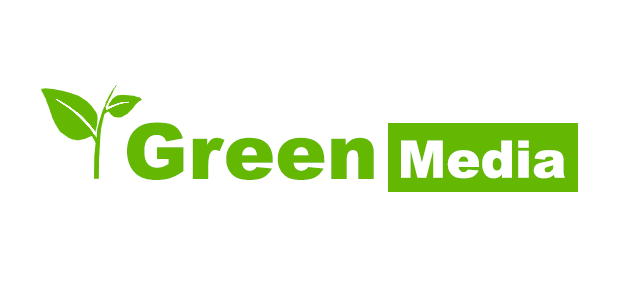
<style>
.page{position:relative;width:640px;height:290px;background:#ffffff}
.page>*{position:absolute;margin:0}
.t1{font:77.3px "Arial-Black";color:#64b802}
.t2{font:51.6px "Arial-Black";color:#ffffff}
</style>
<div class="page">
<p class="t1" style="left:127px;top:122px;width:247px;height:58px">Green</p>
<p class="t2" style="left:401px;top:140px;width:164px;height:39px">Media</p>
</div>
